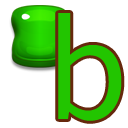
<style>
.page{position:relative;width:128px;height:128px;background:#ffffff}
.page>*{position:absolute;margin:0}
.t1{font:132.9px "SourceHanSansCN-Regular";color:#22c500}
</style>
<div class="page">
<p class="t1" style="left:58px;top:13px;width:64px;height:108px">b</p>
</div>
